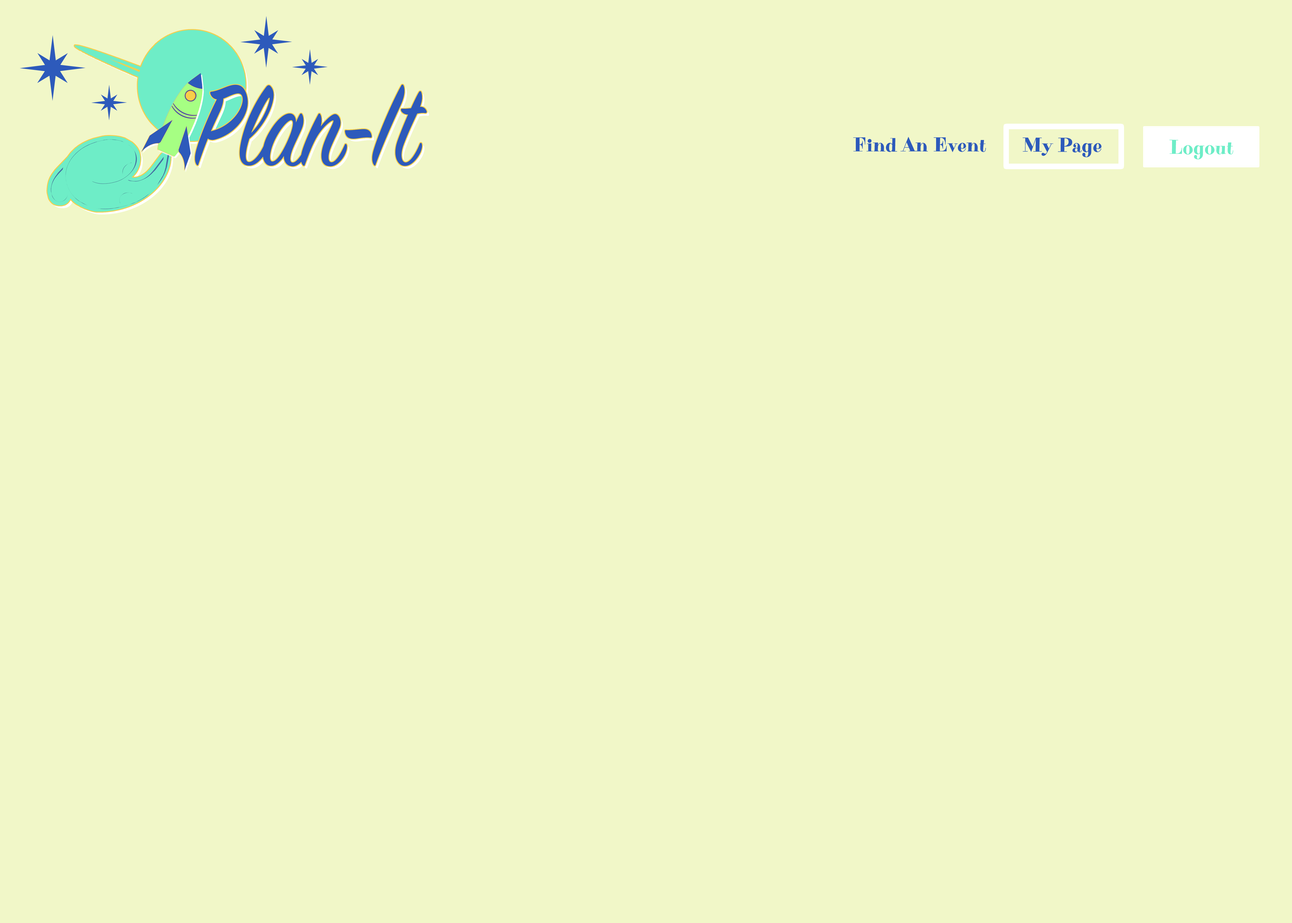
<style>
.page{position:relative;width:1292px;height:923px;background:#f1f7c8}
.page>*{position:absolute;margin:0}
.t1{font:20.2px "PurplePurse-Regular";color:#2d5abb}
.t2{font:20.2px "PurplePurse-Regular";color:#6eedc7}
</style>
<div class="page">
<p class="t1" style="left:853px;top:137px;width:133px;height:15px">Find An Event</p>
<p class="t1" style="left:1023px;top:138px;width:79px;height:19px">My Page</p>
<p class="t2" style="left:1169px;top:140px;width:64px;height:19px">Logout</p>
</div>
